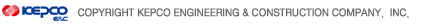
<style>
.page{position:relative;width:432px;height:25px;background:#ffffff}
.page>*{position:absolute;margin:0}
.t1{font:10.8px "SandTg";letter-spacing:-0.025em;color:#666666;font-weight:bold}
</style>
<div class="page">
<p class="t1" style="left:78px;top:8px;width:331px;height:10px">COPYRIGHT KEPCO ENGINEERING &amp; CONSTRUCTION COMPANY.  INC.</p>
</div>
